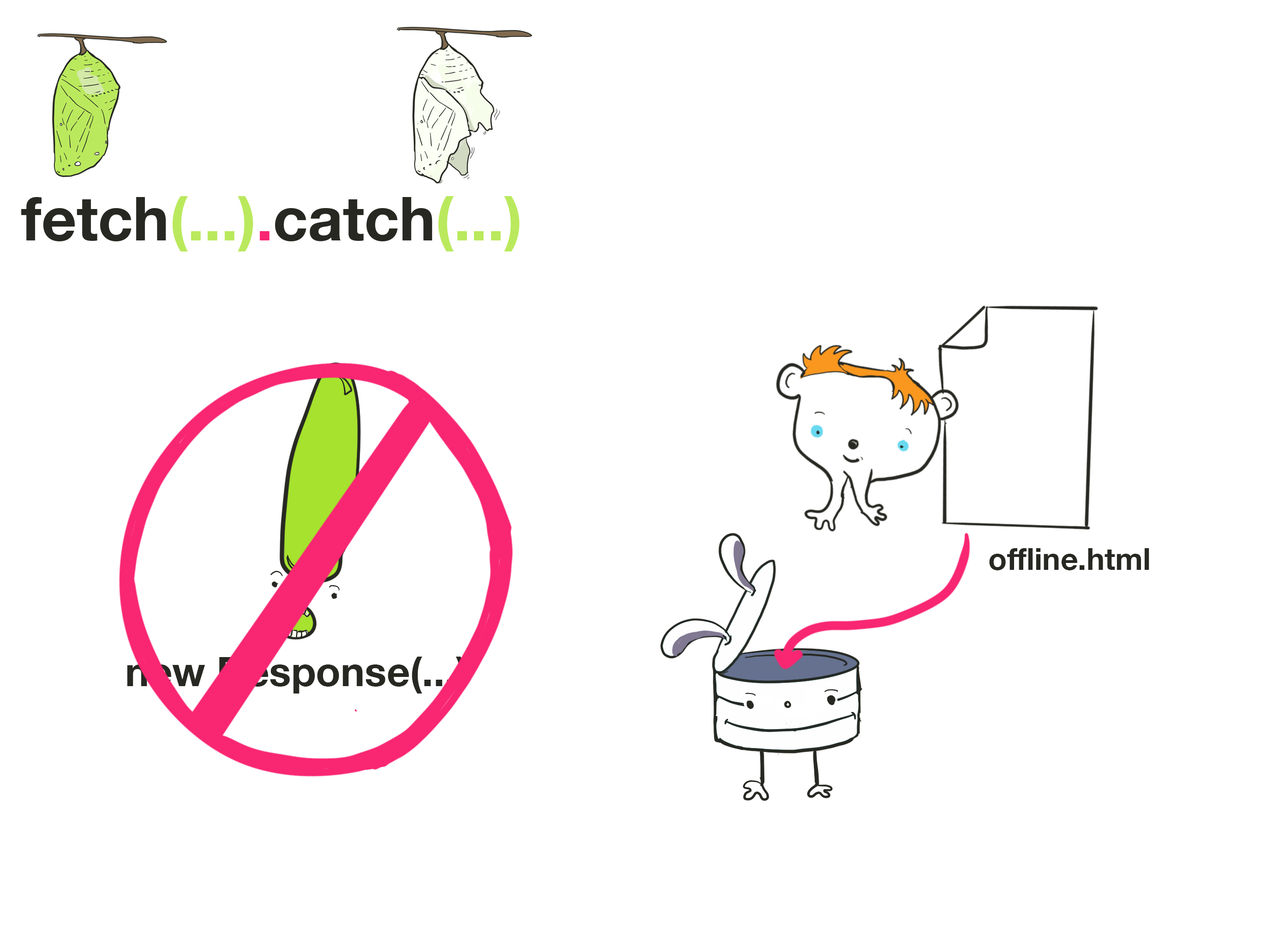
<style>
.page{position:relative;width:1261px;height:945px;background:#ffffff}
.page>*{position:absolute;margin:0}
.t1{font:30.5px "HelveticaNeue-Bold";color:#272822}
.t2{font:40.6px "HelveticaNeue-Bold";color:#272822}
</style>
<div class="page">
<p class="t1" style="left:989px;top:548px;width:161px;height:23px">offline.html</p>
<p class="t2" style="left:127px;top:657px;width:339px;height:37px">new Response(...)</p>
</div>
